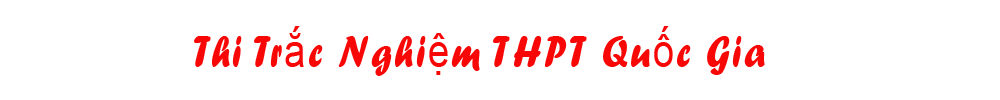
<style>
.page{position:relative;width:1000px;height:100px;background:#ffffff}
.page>*{position:absolute;margin:0}
.t1{font:46.4px "ForteMT";letter-spacing:0.06em;color:#f80707;scale:0.83 1}
.t2{font:46.4px "ArialMT";letter-spacing:0.06em;color:#f80707;scale:0.83 1}
</style>
<div class="page">
<p class="t1" style="left:194px;top:26px;width:571px;height:50px">Thi Tr<span class="t2">ắ</span>c Nghi<span class="t2">ệ</span>m THPT Qu<span class="t2">ố</span>c Gia</p>
</div>
